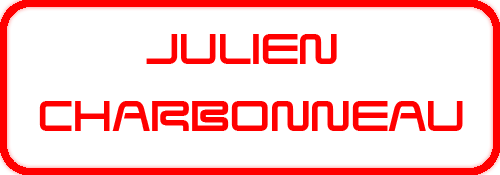
<style>
.page{position:relative;width:500px;height:175px;background:#ffffff}
.page>*{position:absolute;margin:0}
.t1{font:42px "SavedByZero-Regular";color:#ff0000}
</style>
<div class="page">
<p class="t1" style="left:146px;top:34px;width:191px;height:30px">Julien</p>
<p class="t1" style="left:39px;top:101px;width:424px;height:30px">Charbonneau</p>
</div>
